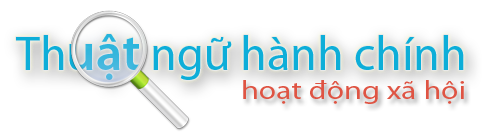
<style>
.page{position:relative;width:504px;height:140px;background:#ffffff}
.page>*{position:absolute;margin:0}
.t1{font:48px "MyriadPro-Regular";color:#00aad6}
.t2{font:52px "MyriadPro-Semibold";color:#00aad6}
.t3{font:26px "MyriadPro-Regular";color:#dd4b39;scale:1.23 1}
</style>
<div class="page">
<p class="t1" style="left:16px;top:34px;width:448px;height:46px;opacity:0.95">Th<span class="t2">uật</span> ngữ hành chính</p>
<p class="t3" style="left:243px;top:80px;width:221px;height:24px;opacity:0.95">hoạt động xã hội</p>
</div>
